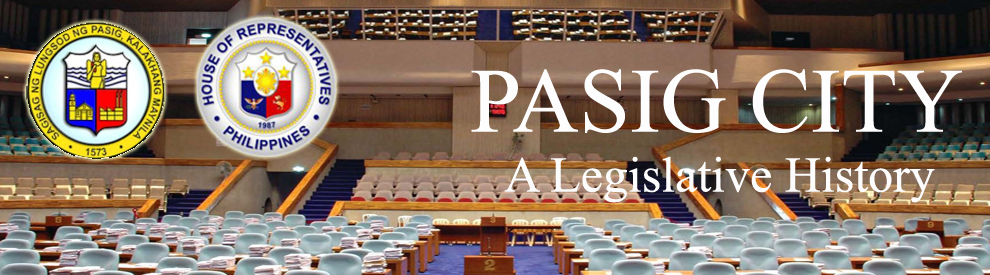
<style>
.page{position:relative;width:990px;height:275px}
.page>*{position:absolute;margin:0}
.t1{font:50px "TimesNewRomanPSMT";color:#fdfcfc}
.t2{font:91.7px "TimesNewRomanPSMT";color:#fdfdfd}
</style>
<div class="page">
<p class="t1" style="left:471px;top:69px;width:491px;height:134px;text-align:center"><span class="t2">PASIG CITY<br></span>A Legislative History</p>
</div>
